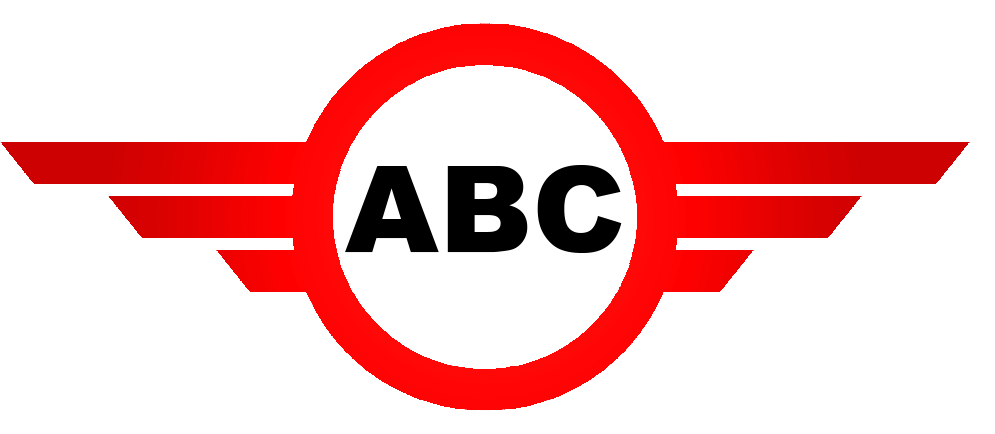
<style>
.page{position:relative;width:995px;height:434px;background:#ffffff}
.page>*{position:absolute;margin:0}
.t1{font:120px "Arial-Black";color:#000000}
</style>
<div class="page">
<p class="t1" style="left:345px;top:165px;width:277px;height:88px">ABC</p>
</div>
